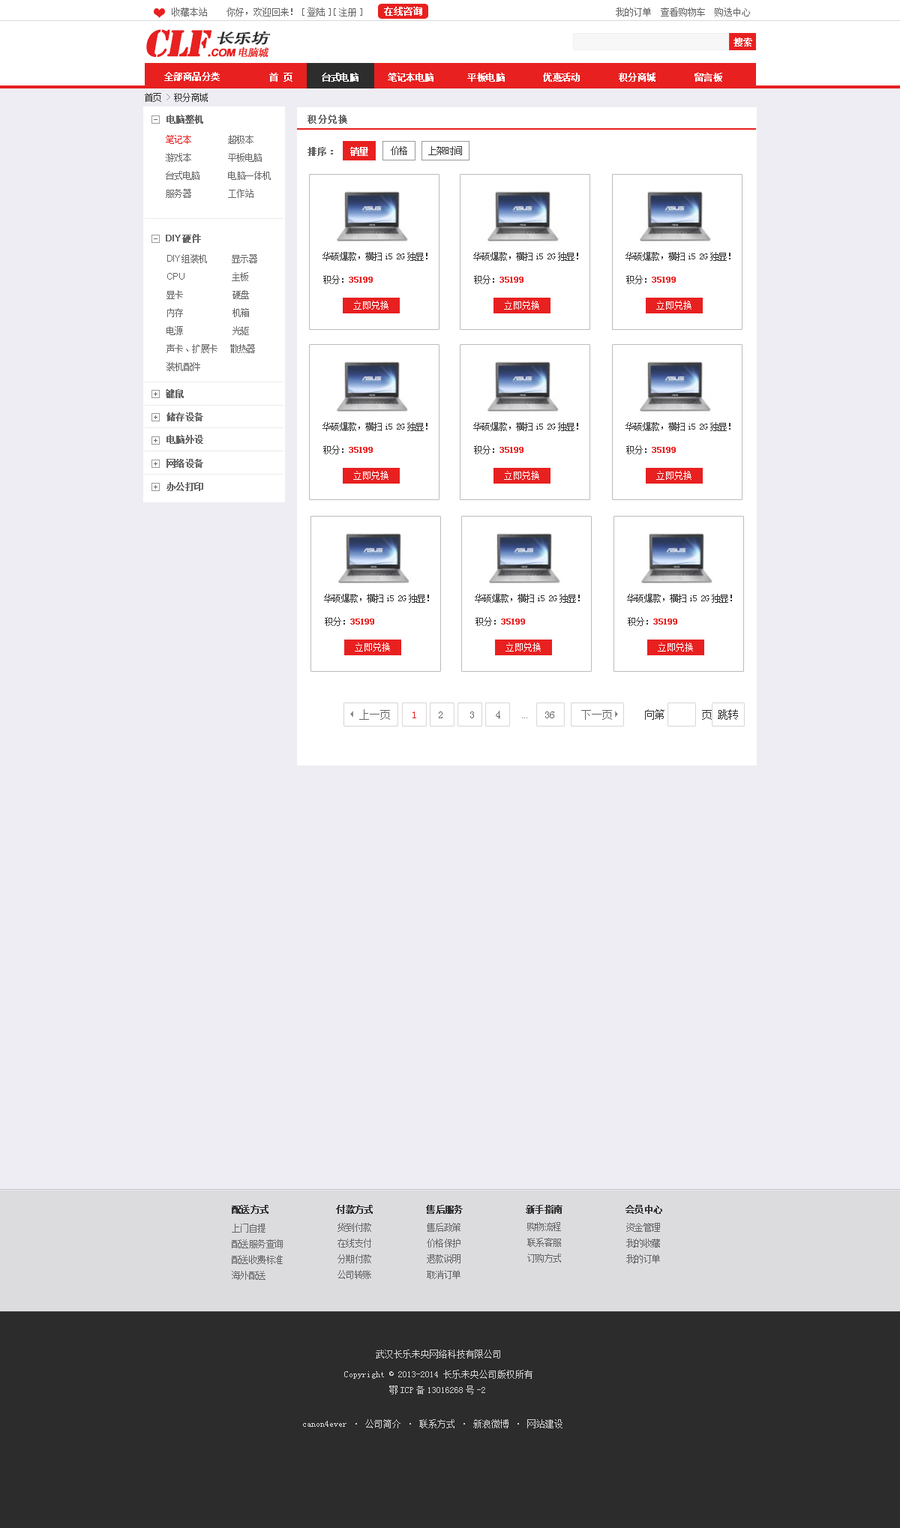
<style>
.page{position:relative;width:900px;height:1528px;background:#eeedf3}
.page>*{position:absolute;margin:0}
.t1{font:9px "SimSun";color:#666666}
.t2{font:9px "SimSun";color:#ffffff;font-weight:bold}
.t3{font:34.5px "StencilStd";letter-spacing:-0.05em;color:#e82020;font-weight:bold;font-style:italic}
.t4{font:10.5px "StencilStd";letter-spacing:-0.05em;color:#e82020;font-weight:bold;font-style:italic}
.t5{font:10.5px "Arial-BoldMT";letter-spacing:-0.05em;color:#e82020;font-weight:bold;font-style:italic}
.t6{font:10.5px "AdobeHeitiStd-Regular";letter-spacing:-0.05em;color:#e82020;font-weight:bold;font-style:italic}
.t7{font:14.2px "AdobeHeitiStd-Regular";letter-spacing:-0.05em;color:#2d2d2d;font-weight:bold;font-style:italic;scale:1.26 1}
.t8{font:9px "SimSun";letter-spacing:-0.05em;color:#ffffff;font-weight:bold}
.t9{font:9px "SimSun";letter-spacing:-0.05em;color:#333333}
.t10{font:9px "SimSun";letter-spacing:-0.05em;color:#999999}
.t11{font:9px "SimSun";letter-spacing:-0.05em;color:#666666;font-weight:bold}
.t12{font:9px "SimSun";letter-spacing:0.05em;color:#666666;font-weight:bold}
.t13{font:9px/18px "SimSun";letter-spacing:-0.05em;color:#666666}
.t14{font:9px/18px "SimSun";letter-spacing:-0.05em;color:#e82020}
.t15{font:9px "SimSun";color:#666666;font-weight:bold}
.t16{font:9px "ArialMT";letter-spacing:-0.05em;color:#666666;font-weight:bold}
.t17{font:9px/18px "ArialMT";letter-spacing:-0.05em;color:#666666}
.t18{font:9px "SimSun";letter-spacing:-0.05em;color:#e82020;font-weight:bold}
.t19{font:9px "SimSun";color:#ffffff}
.t20{font:7.5px "SimSun";letter-spacing:-0.05em;color:#666666}
.t21{font:10.5px "SimSun";color:#666666}
.t22{font:10.5px "SimSun";color:#333333}
.t23{font:10.5px "SimSun";color:#e82020}
.t24{font:4.5px "SimSun";color:#666666}
.t25{font:9px "SimSun";letter-spacing:-0.05em;color:#333333;font-weight:bold}
.t26{font:9px "SimSun";letter-spacing:-0.05em;color:#666666}
.t27{font:9px "SimSun";color:#d4d4d4}
.t28{font:13.5px "MicrosoftYaHei";color:#ffffff;font-weight:bold}
</style>
<div class="page">
<p class="t1" style="left:172px;top:8px;width:35px;height:8px">收藏本站</p>
<p class="t1" style="left:226px;top:8px;width:524px;height:8px">你好，欢迎回来！[登陆][注册]                                                        我的订单  查看购物车  购选中心</p>
<p class="t2" style="left:384px;top:7px;width:38px;height:9px">在线咨询</p>
<p class="t3" style="left:146px;top:29px;width:123px;height:29px">CLF<span class="t4">.</span><span class="t5">COM</span><span class="t6">电脑城</span></p>
<p class="t7" style="left:218px;top:31px;width:53px;height:14px">长乐坊</p>
<p class="t2" style="left:734px;top:38px;width:18px;height:8px">搜索</p>
<p class="t8" style="left:164px;top:72px;width:56px;height:9px">全部商品分类</p>
<p class="t8" style="left:269px;top:73px;width:453px;height:9px">首 页      台式电脑      笔记本电脑       平板电脑        优惠活动        积分商城        留言板</p>
<p class="t9" style="left:145px;top:93px;width:63px;height:9px">首页 <span class="t10">&gt;</span> 积分商城</p>
<p class="t11" style="left:166px;top:115px;width:37px;height:9px">电脑整机</p>
<p class="t12" style="left:308px;top:115px;width:39px;height:9px">积分兑换</p>
<p class="t13" style="left:166px;top:135px;width:105px;height:63px"><span class="t14">笔记本</span>         超极本<br>游戏本         平板电脑<br>台式电脑       电脑一体机<br>服务器         工作站</p>
<p class="t15" style="left:308px;top:147px;width:25px;height:9px">排序：</p>
<p class="t8" style="left:350px;top:147px;width:18px;height:9px">销量</p>
<p class="t9" style="left:391px;top:146px;width:16px;height:9px">价格</p>
<p class="t9" style="left:428px;top:146px;width:34px;height:9px">上架时间</p>
<p class="t16" style="left:166px;top:234px;width:35px;height:9px">DIY<span class="t11">硬件</span></p>
<p class="t13" style="left:166px;top:254px;width:91px;height:117px"><span class="t17">DIY</span>组装机      显示器<br><span class="t17">CPU                          </span>主板<br>显卡            硬盘<br>内存            机箱<br>电源            光驱<br>声卡、扩展卡   散热器<br>装机配件</p>
<p class="t9" style="left:322px;top:252px;width:106px;height:9px">华硕爆款，横扫i5 2G独显！</p>
<p class="t9" style="left:473px;top:252px;width:105px;height:9px">华硕爆款，横扫i5 2G独显！</p>
<p class="t9" style="left:626px;top:252px;width:104px;height:9px">华硕爆款，横扫i5 2G独显！</p>
<p class="t18" style="left:323px;top:275px;width:50px;height:9px"><span class="t9">积分：</span>35199</p>
<p class="t18" style="left:474px;top:275px;width:50px;height:9px"><span class="t9">积分：</span>35199</p>
<p class="t18" style="left:626px;top:275px;width:50px;height:9px"><span class="t9">积分：</span>35199</p>
<p class="t19" style="left:353px;top:301px;width:35px;height:9px">立即兑换</p>
<p class="t19" style="left:504px;top:301px;width:35px;height:9px">立即兑换</p>
<p class="t19" style="left:656px;top:301px;width:36px;height:9px">立即兑换</p>
<p class="t11" style="left:166px;top:389px;width:18px;height:9px">键鼠</p>
<p class="t20" style="left:154px;top:392px;width:4px;height:4px">+</p>
<p class="t11" style="left:166px;top:412px;width:37px;height:10px">储存设备</p>
<p class="t20" style="left:154px;top:416px;width:4px;height:3px">+</p>
<p class="t9" style="left:322px;top:422px;width:106px;height:9px">华硕爆款，横扫i5 2G独显！</p>
<p class="t9" style="left:473px;top:422px;width:105px;height:9px">华硕爆款，横扫i5 2G独显！</p>
<p class="t9" style="left:626px;top:422px;width:104px;height:9px">华硕爆款，横扫i5 2G独显！</p>
<p class="t11" style="left:166px;top:435px;width:37px;height:9px">电脑外设</p>
<p class="t20" style="left:154px;top:439px;width:4px;height:3px">+</p>
<p class="t18" style="left:323px;top:446px;width:50px;height:8px"><span class="t9">积分：</span>35199</p>
<p class="t18" style="left:474px;top:446px;width:50px;height:8px"><span class="t9">积分：</span>35199</p>
<p class="t18" style="left:626px;top:446px;width:50px;height:8px"><span class="t9">积分：</span>35199</p>
<p class="t20" style="left:154px;top:462px;width:4px;height:4px">+</p>
<p class="t11" style="left:166px;top:459px;width:37px;height:9px">网络设备</p>
<p class="t19" style="left:353px;top:471px;width:35px;height:9px">立即兑换</p>
<p class="t19" style="left:504px;top:471px;width:35px;height:9px">立即兑换</p>
<p class="t19" style="left:656px;top:471px;width:36px;height:9px">立即兑换</p>
<p class="t20" style="left:154px;top:485px;width:4px;height:4px">+</p>
<p class="t11" style="left:166px;top:482px;width:37px;height:9px">办公打印</p>
<p class="t9" style="left:324px;top:594px;width:105px;height:9px">华硕爆款，横扫i5 2G独显！</p>
<p class="t9" style="left:475px;top:594px;width:105px;height:9px">华硕爆款，横扫i5 2G独显！</p>
<p class="t9" style="left:627px;top:594px;width:105px;height:9px">华硕爆款，横扫i5 2G独显！</p>
<p class="t18" style="left:325px;top:617px;width:49px;height:9px"><span class="t9">积分：</span>35199</p>
<p class="t18" style="left:476px;top:617px;width:49px;height:9px"><span class="t9">积分：</span>35199</p>
<p class="t18" style="left:628px;top:617px;width:49px;height:9px"><span class="t9">积分：</span>35199</p>
<p class="t19" style="left:355px;top:643px;width:35px;height:9px">立即兑换</p>
<p class="t19" style="left:506px;top:643px;width:35px;height:9px">立即兑换</p>
<p class="t19" style="left:658px;top:643px;width:35px;height:9px">立即兑换</p>
<p class="t21" style="left:359px;top:710px;width:31px;height:10px">上一页</p>
<p class="t22" style="left:412px;top:710px;width:326px;height:10px"><span class="t23">1</span><span class="t21">    2     3    4    </span><span class="t24">...</span><span class="t21">   36     下一页      </span>向第       页 跳转</p>
<p class="t25" style="left:232px;top:1205px;width:430px;height:9px">配送方式              付款方式           售后服务             新手指南             会员中心</p>
<p class="t26" style="left:232px;top:1224px;width:51px;height:56px">上门自提<br>配送服务查询<br>配送收费标准<br>海外配送</p>
<p class="t26" style="left:338px;top:1223px;width:33px;height:57px">货到付款<br>在线支付<br>分期付款<br>公司转账</p>
<p class="t26" style="left:427px;top:1223px;width:33px;height:57px">售后政策<br>价格保护<br>退款说明<br>取消订单</p>
<p class="t26" style="left:527px;top:1222px;width:34px;height:41px">购物流程<br>联系客服<br>订购方式</p>
<p class="t26" style="left:626px;top:1223px;width:34px;height:41px">资金管理<br>我的收藏<br>我的订单</p>
<p class="t27" style="left:344px;top:1350px;width:188px;height:45px"><span class="t28">                         </span>武汉长乐未央网络科技有限公司<br>                  Copyright © 2013-2014 长乐未央公司版权所有<br>                            鄂ICP备13016268号-2</p>
<p class="t27" style="left:303px;top:1420px;width:259px;height:9px"><span class="t28">              </span>canon4ever · 公司简介 · 联系方式 · 新浪微博 · 网站建设</p>
</div>
